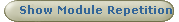
<style>
.page{position:relative;width:179px;height:22px}
.page>*{position:absolute;margin:0}
.t1{font:11px "Verdana-Bold";color:#336699}
</style>
<div class="page">
<p class="t1" style="left:20px;top:5px;width:152px;height:11px">Show Module Repetition</p>
</div>
